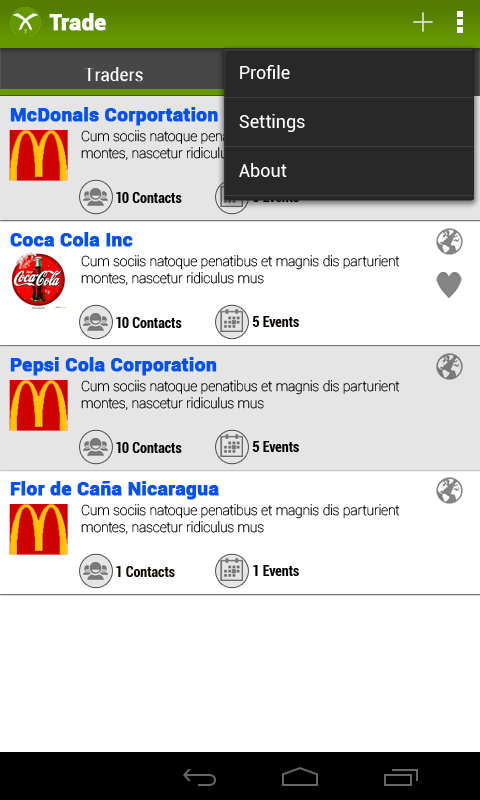
<style>
.page{position:relative;width:480px;height:800px;background:#ffffff}
.page>*{position:absolute;margin:0}
.t1{font:22px "Roboto-Black";color:#fefefe;font-weight:bold}
.t2{font:18px "Roboto-Regular";color:#ffffff}
.t3{font:18px "Roboto-Condensed";color:#ffffff;scale:1.1 1}
.t4{font:19px "Roboto-Black";color:#0351f1;font-weight:bold}
.t5{font:14px "Roboto-BoldCondensed";color:#020100}
.t6{font:14px/18px "Roboto-Thin";color:#000000}
.t7{font:14px "Roboto-BoldCondensed";color:#000000}
.t8{font:14px "Roboto-BoldCondensed";color:#080500}
.t9{font:14px "Roboto-BoldCondensed";color:#030200}
.t10{font:14px "Roboto-BoldCondensed";color:#040200}
.t11{font:14px "Roboto-BoldCondensed";color:#100a00}
</style>
<div class="page">
<p class="t1" style="left:49px;top:13px;width:57px;height:18px">Trade</p>
<p class="t2" style="left:240px;top:65px;width:50px;height:14px">Profile</p>
<p class="t3" style="left:84px;top:67px;width:59px;height:15px">Traders</p>
<p class="t4" style="left:10px;top:107px;width:208px;height:19px">McDonals Corportation</p>
<p class="t2" style="left:239px;top:114px;width:66px;height:18px">Settings</p>
<p class="t2" style="left:239px;top:163px;width:48px;height:14px">About</p>
<p class="t5" style="left:116px;top:192px;width:66px;height:11px">10 Contacts</p>
<p class="t4" style="left:10px;top:232px;width:123px;height:15px">Coca Cola Inc</p>
<p class="t6" style="left:81px;top:255px;width:319px;height:30px">Cum sociis natoque penatibus et magnis dis parturient <br>montes, nascetur ridiculus mus</p>
<p class="t7" style="left:116px;top:317px;width:66px;height:11px">10 Contacts</p>
<p class="t8" style="left:252px;top:316px;width:47px;height:11px">5 Events</p>
<p class="t4" style="left:10px;top:357px;width:207px;height:19px">Pepsi Cola Corporation</p>
<p class="t6" style="left:81px;top:380px;width:319px;height:30px">Cum sociis natoque penatibus et magnis dis parturient <br>montes, nascetur ridiculus mus</p>
<p class="t9" style="left:116px;top:442px;width:66px;height:11px">10 Contacts</p>
<p class="t10" style="left:252px;top:441px;width:47px;height:11px">5 Events</p>
<p class="t4" style="left:10px;top:481px;width:209px;height:19px">Flor de Caña Nicaragua</p>
<p class="t6" style="left:81px;top:504px;width:319px;height:30px">Cum sociis natoque penatibus et magnis dis parturient <br>montes, nascetur ridiculus mus</p>
<p class="t11" style="left:116px;top:566px;width:59px;height:11px">1 Contacts</p>
<p class="t7" style="left:253px;top:565px;width:46px;height:11px">1 Events</p>
</div>
